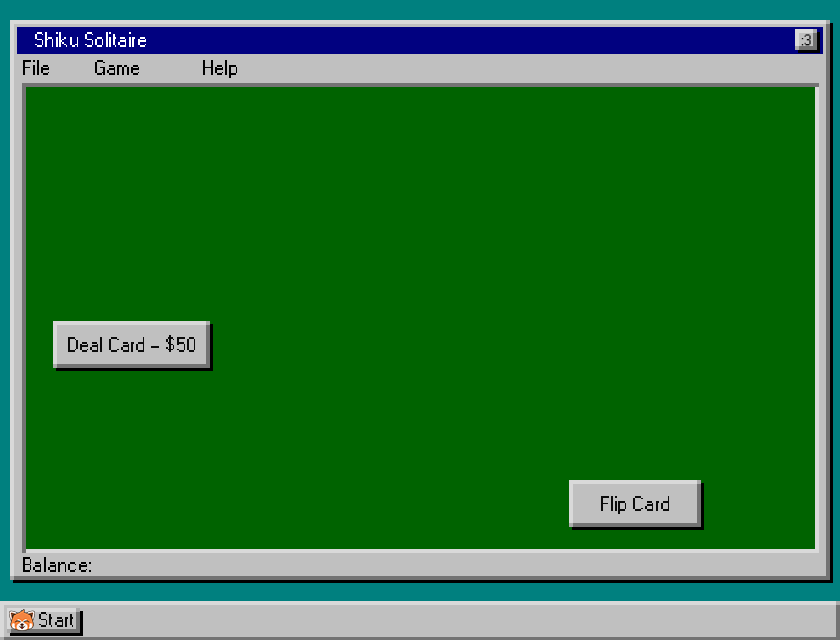
<style>
.page{position:relative;width:840px;height:640px;background:#006300}
.page>*{position:absolute;margin:0}
.t1{font:20.8px "W95FARegular";color:#ffffff}
.t2{font:15.1px "W95FARegular";color:#0b0b0b}
.t3{font:20.8px "W95FARegular";color:#000000}
.t4{font:20.8px "W95FARegular";color:#0b0b0b}
.t5{font:20.9px "W95FARegular";color:#000000}
</style>
<div class="page">
<p class="t1" style="left:35px;top:32px;width:111px;height:15px">Shiku Solitaire</p>
<p class="t2" style="left:801px;top:34px;width:10px;height:12px">:3</p>
<p class="t3" style="left:23px;top:60px;width:214px;height:18px">File  Game  Help</p>
<p class="t4" style="left:68px;top:335px;width:127px;height:17px">Deal Card - $50</p>
<p class="t4" style="left:601px;top:496px;width:68px;height:18px">Flip Card</p>
<p class="t5" style="left:23px;top:557px;width:68px;height:15px">Balance:</p>
<p class="t4" style="left:39px;top:612px;width:34px;height:15px">Start</p>
</div>
